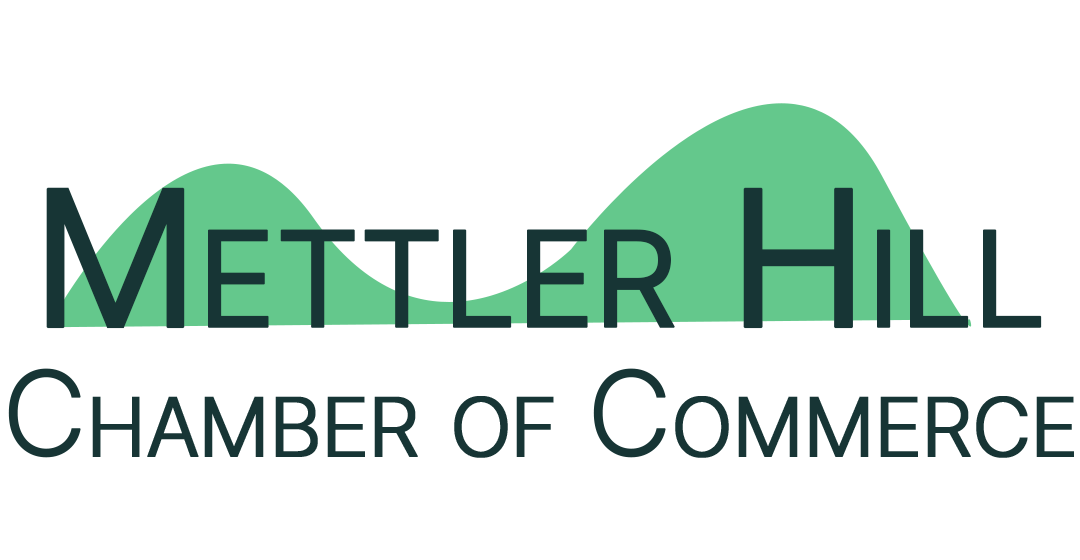
<style>
.page{position:relative;width:1080px;height:560px;background:#ffffff}
.page>*{position:absolute;margin:0}
.t1{font:190px "Inter-Regular";letter-spacing:-0.04em;color:#173535;font-variant:small-caps;font-weight:bold}
.t2{font:116.5px "Inter-Light";letter-spacing:-0.04em;color:#173535;font-variant:small-caps;font-weight:bold}
</style>
<div class="page">
<p class="t1" style="left:46px;top:187px;width:996px;height:142px">Mettler Hill</p>
<p class="t2" style="left:8px;top:368px;width:1066px;height:90px">Chamber of Commerce</p>
</div>
